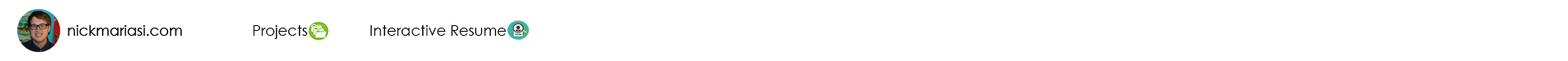
<style>
.page{position:relative;width:1568px;height:61px;background:#ffffff}
.page>*{position:absolute;margin:0}
.t1{font:14.7px "CenturyGothic";color:#000000}
</style>
<div class="page">
<p class="t1" style="left:253px;top:25px;width:55px;height:14px">Projects</p>
<p class="t1" style="left:370px;top:25px;width:136px;height:11px">Interactive Resume</p>
</div>
